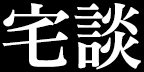
<style>
.page{position:relative;width:144px;height:72px;background:#000000}
.page>*{position:absolute;margin:0}
.t1{font:72px "DFMinchoP-W5-WIN-RKSJ-H";color:#ffffff}
</style>
<div class="page">
<p class="t1" style="left:2px;top:3px;width:139px;height:67px">宅談</p>
</div>
